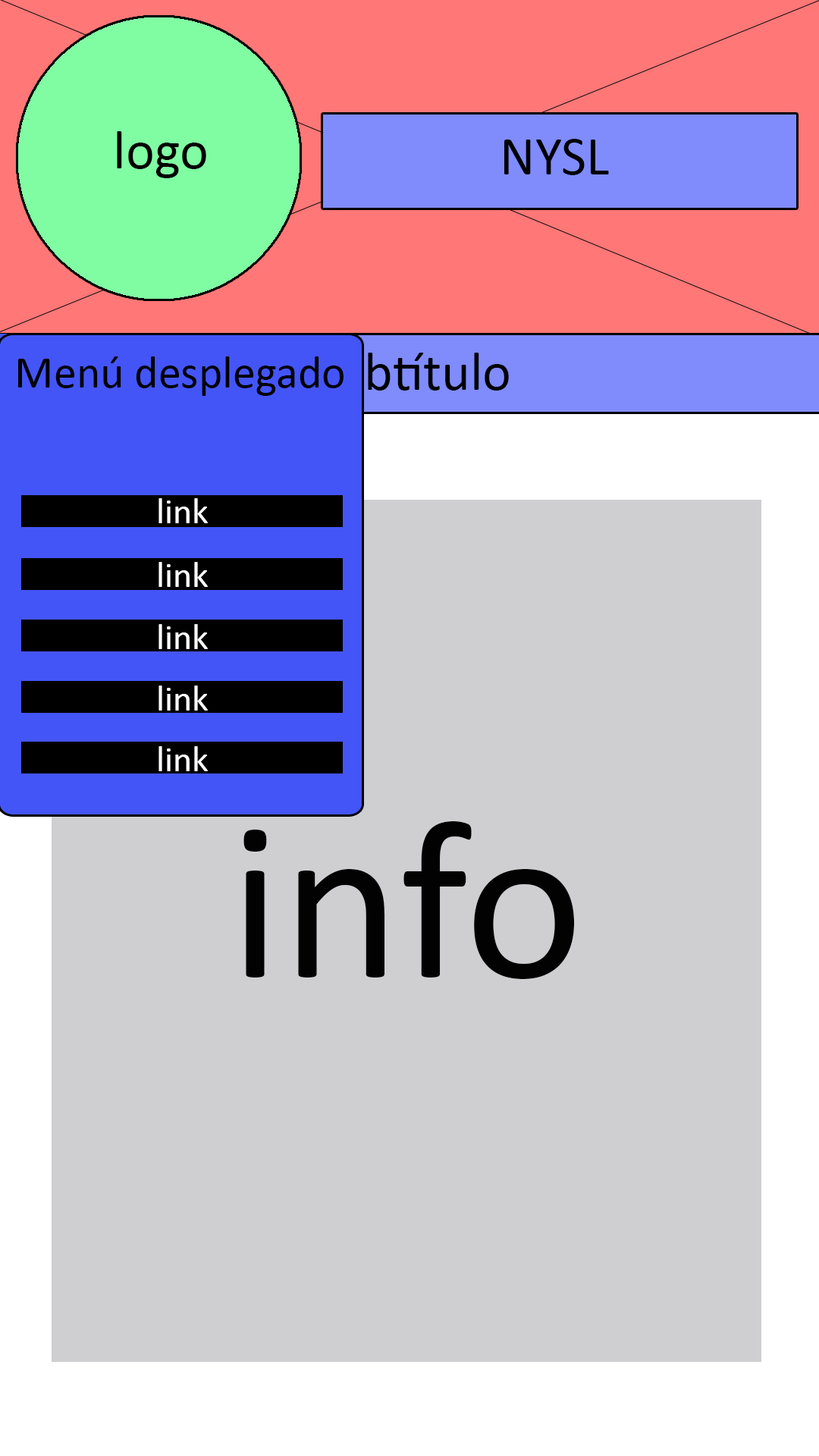
<style>
.page{position:relative;width:819px;height:1456px;background:#cfcfd2}
.page>*{position:absolute;margin:0}
.t1{font:45.5px "Calibri";color:#000000}
.t2{font:36.4px "Calibri";color:#ffffff}
</style>
<div class="page">
<p class="t1" style="left:18px;top:356px;width:326px;height:40px">Menú desplegado</p>
<p class="t2" style="left:158px;top:498px;width:50px;height:25px">link</p>
<p class="t2" style="left:158px;top:562px;width:50px;height:25px">link</p>
<p class="t2" style="left:158px;top:624px;width:50px;height:25px">link</p>
<p class="t2" style="left:158px;top:686px;width:50px;height:25px">link</p>
<p class="t2" style="left:158px;top:746px;width:50px;height:25px">link</p>
</div>
